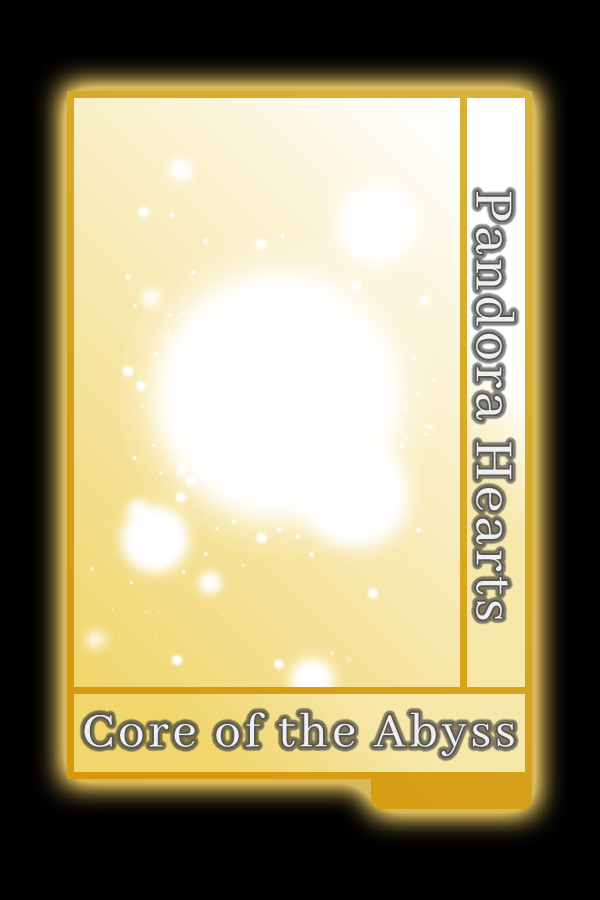
<style>
.page{position:relative;width:600px;height:900px;background:#000000}
.page>*{position:absolute;margin:0}
.t1{font:59.1px "AbhayaLibre-Regular";letter-spacing:0.072em;color:#efefef}
.t2{font:53px "AbhayaLibre-Regular";letter-spacing:0.072em;color:#efefef}
</style>
<div class="page">
<p class="t1" style="left:476px;top:192px;width:39px;height:428px;rotate:90deg">Pandora Hearts</p>
<p class="t2" style="left:84px;top:712px;width:430px;height:45px">Core of the Abyss</p>
</div>
